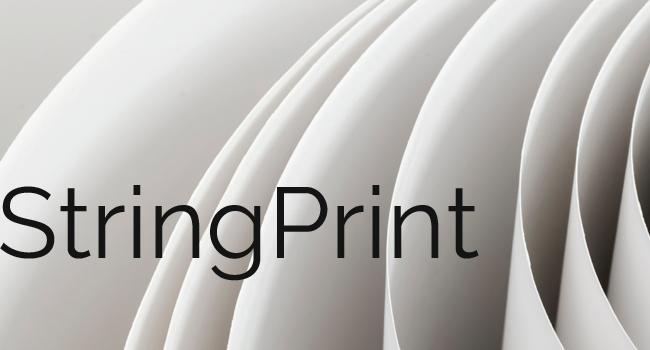
<style>
.page{position:relative;width:650px;height:350px}
.page>*{position:absolute;margin:0}
.t1{font:100px "Raleway-Regular";color:#141414}
</style>
<div class="page">
<p class="t1" style="left:0px;top:185px;width:479px;height:96px">StringPrint</p>
</div>
